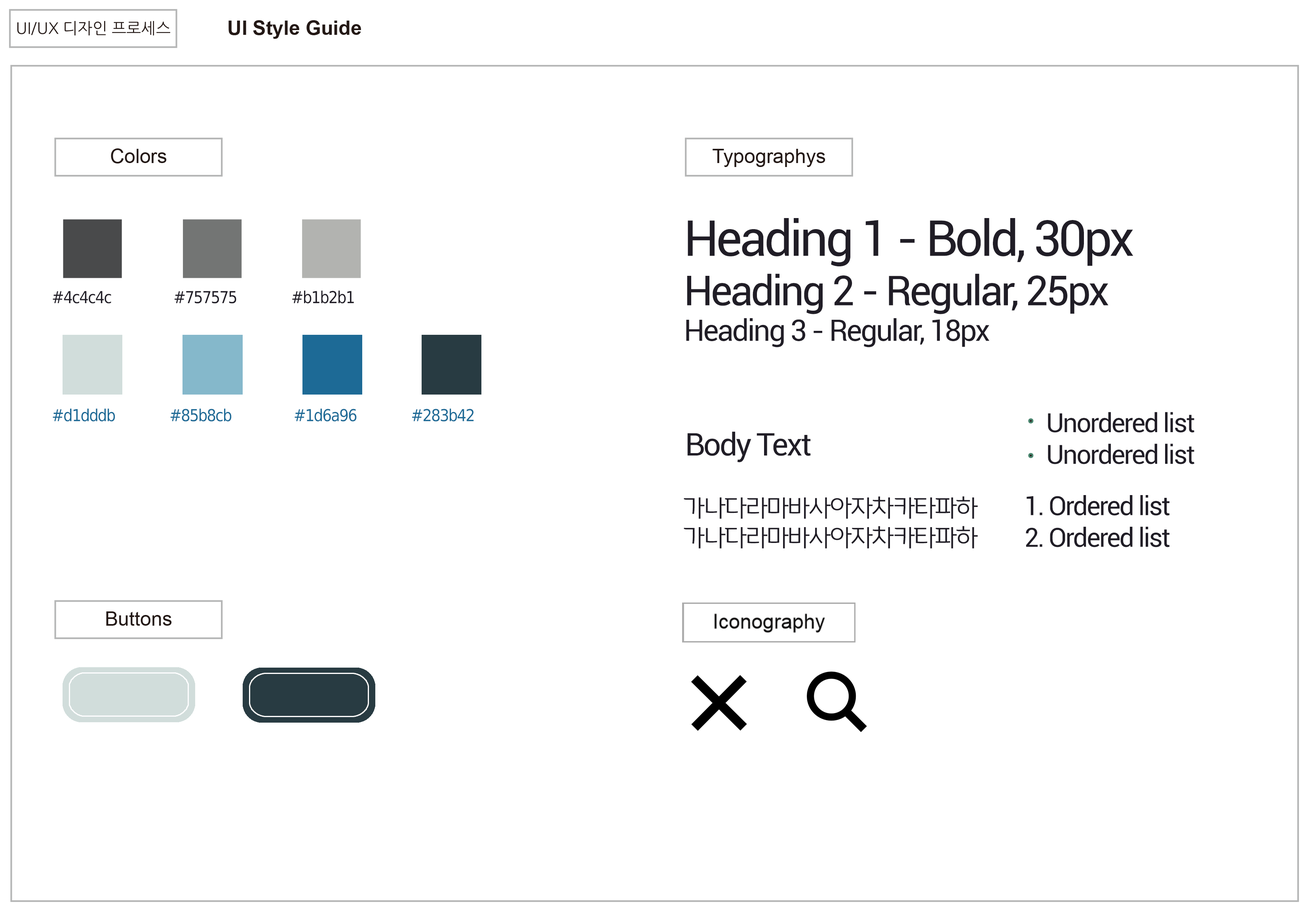
<style>
.page{position:relative;width:1308px;height:911px;background:#ffffff}
.page>*{position:absolute;margin:0}
.t1{font:41.2px "Roboto-Regular";letter-spacing:-0.05em;color:#201d26}
.t2{font:49.5px "Roboto-Regular";letter-spacing:-0.05em;color:#201d26}
.t3{font:29.7px "Roboto-Regular";letter-spacing:-0.05em;color:#201d26}
.t4{font:16.5px "DejaVuSansCondensed";letter-spacing:-0.05em;color:#201d26}
.t5{font:16.5px "DejaVuSansCondensed";letter-spacing:-0.05em;color:#1d6a96}
.t6{font:26.4px "Roboto-Regular";letter-spacing:-0.05em;color:#201d26}
.t7{font:31.3px "Roboto-Regular";letter-spacing:-0.05em;color:#201d26}
.t8{font:24.7px "HangeulNuri";letter-spacing:-0.05em;color:#201d26}
</style>
<div class="page">
<p class="t1" style="left:686px;top:218px;width:448px;height:130px"><span class="t2">Heading 1 - Bold, 30px<br></span>Heading 2 - Regular, 25px<br><span class="t3">Heading 3 - Regular, 18px</span></p>
<p class="t4" style="left:53px;top:291px;width:301px;height:13px">#4c4c4c                #757575              #b1b2b1</p>
<p class="t5" style="left:53px;top:409px;width:421px;height:13px">#d1dddb              #85b8cb                #1d6a96              #283b42</p>
<p class="t6" style="left:1048px;top:412px;width:147px;height:52px">Unordered list<br>Unordered list</p>
<p class="t7" style="left:687px;top:432px;width:124px;height:30px">Body Text</p>
<p class="t8" style="left:684px;top:497px;width:294px;height:52px">가나다라마바사아자차카타파하<br>가나다라마바사아자차카타파하</p>
<p class="t6" style="left:1026px;top:495px;width:144px;height:53px">1. Ordered list<br>2. Ordered list</p>
</div>
